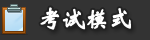
<style>
.page{position:relative;width:150px;height:40px;background:#333333}
.page>*{position:absolute;margin:0}
.t1{font:24px "STXinwei";letter-spacing:-0.05em;color:#ffffff;font-weight:bold}
</style>
<div class="page">
<p class="t1" style="left:40px;top:7px;width:91px;height:23px">考试模式</p>
</div>
